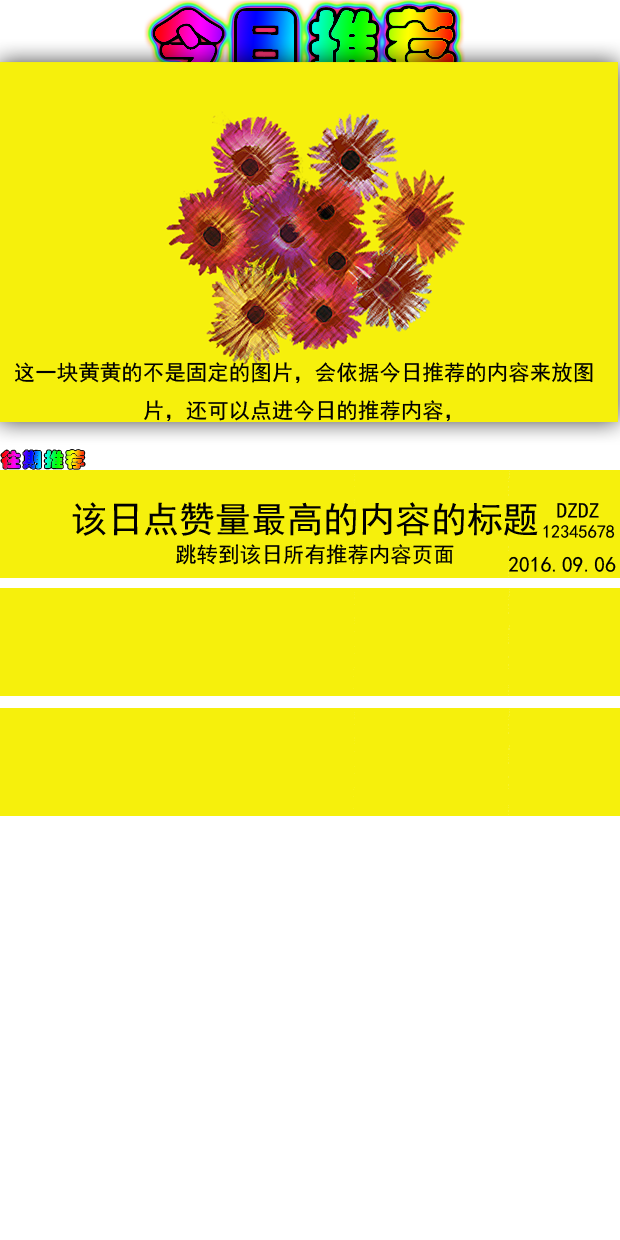
<style>
.page{position:relative;width:620px;height:1240px;background:#f6f00c}
.page>*{position:absolute;margin:0}
.t1{font:21.5px "SimHei";color:#000000}
.t2{font:36px "SimHei";color:#000000}
.t3{font:18.2px "SimHei";color:#000000}
</style>
<div class="page">
<p class="t1" style="left:15px;top:362px;width:578px;height:60px;text-align:center">这一块黄黄的不是固定的图片，会依据今日推荐的内容来放图<br>片，还可以点进今日的推荐内容，</p>
<p class="t2" style="left:72px;top:502px;width:466px;height:34px">该日点赞量最高的内容的标题</p>
<p class="t1" style="left:557px;top:503px;width:42px;height:15px">DZDZ</p>
<p class="t3" style="left:543px;top:525px;width:72px;height:13px">12345678</p>
<p class="t1" style="left:176px;top:544px;width:278px;height:21px">跳转到该日所有推荐内容页面</p>
<p class="t1" style="left:509px;top:556px;width:107px;height:16px">2016.09.06</p>
</div>
